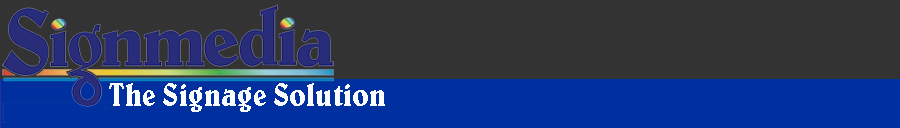
<style>
.page{position:relative;width:900px;height:128px;background:#333333}
.page>*{position:absolute;margin:0}
.t1{font:33.2px "BelweBT-RomanCondensed";color:#fcfdfe}
</style>
<div class="page">
<p class="t1" style="left:109px;top:83px;width:276px;height:29px">The Signage Solution</p>
</div>
